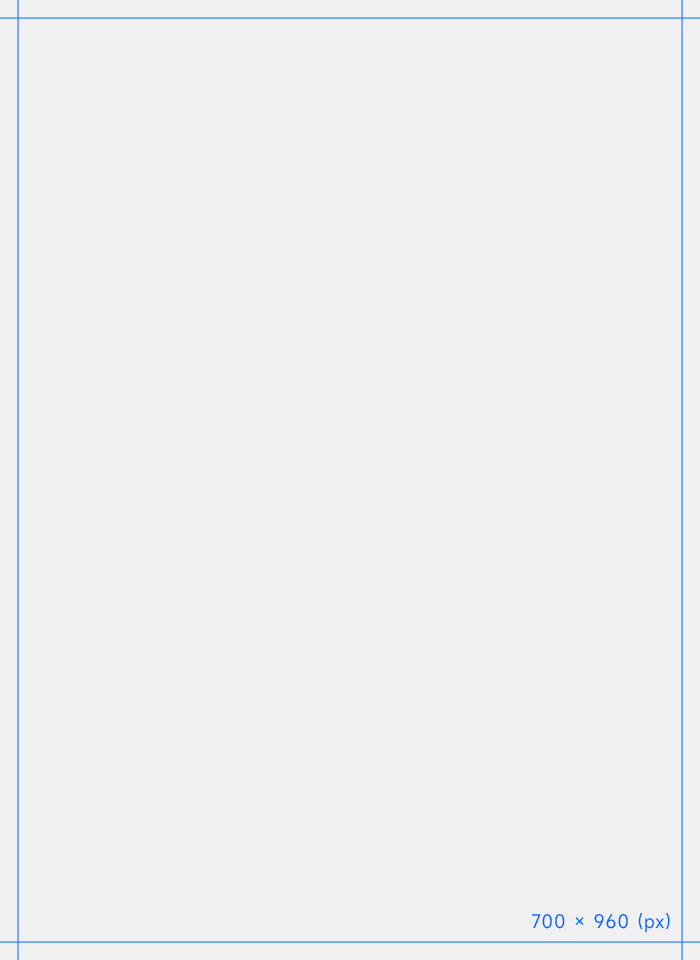
<style>
.page{position:relative;width:700px;height:960px;background:#f0f0f0}
.page>*{position:absolute;margin:0}
.t1{font:18px "MiSans-Regular";letter-spacing:0.06em;color:#0067fe}
</style>
<div class="page">
<p class="t1" style="left:532px;top:912px;width:138px;height:21px">700 × 960 (px)</p>
</div>
